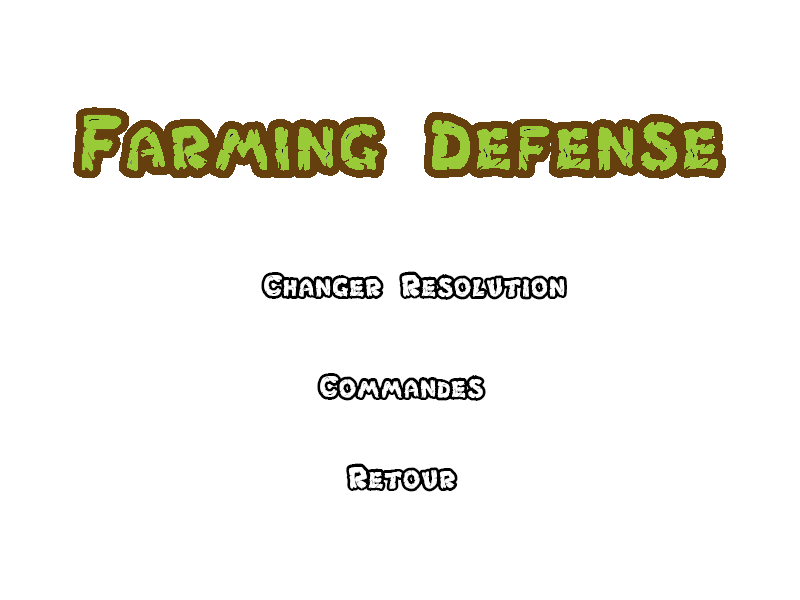
<style>
.page{position:relative;width:800px;height:600px;background:#ffffff}
.page>*{position:absolute;margin:0}
.t1{font:36px "Chlorinar";color:#000000}
</style>
<div class="page">
<p class="t1" style="left:261px;top:271px;width:306px;height:29px">Changer Resolution</p>
<p class="t1" style="left:317px;top:373px;width:169px;height:28px">Commandes</p>
<p class="t1" style="left:346px;top:463px;width:112px;height:29px">Retour</p>
</div>
